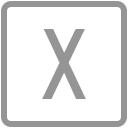
<style>
.page{position:relative;width:128px;height:128px;background:#ffffff}
.page>*{position:absolute;margin:0}
.t1{font:100px "ShareTechMono-Regular";color:#959595}
</style>
<div class="page">
<p class="t1" style="left:42px;top:29px;width:44px;height:70px">X</p>
</div>
